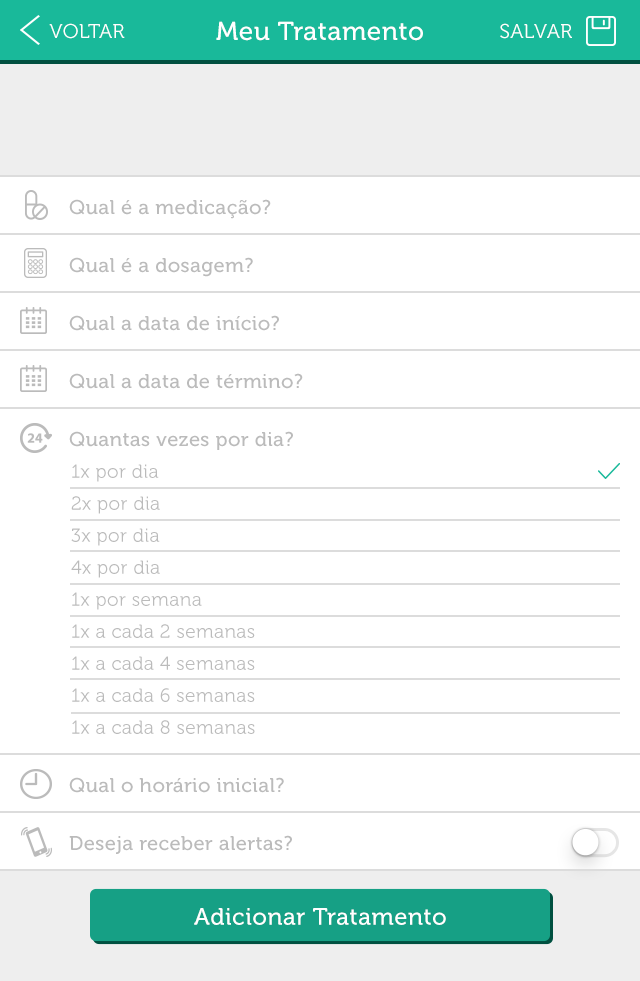
<style>
.page{position:relative;width:640px;height:981px;background:#ffffff}
.page>*{position:absolute;margin:0}
.t1{font:20px "Museo300-Regular";letter-spacing:0.02em;color:#ffffff;text-transform:uppercase}
.t2{font:26px "Museo500-Regular";letter-spacing:0.02em;color:#ffffff}
.t3{font:20px "Museo500-Regular";letter-spacing:0.02em;color:#bbbbbb}
.t4{font:19px/32px "Museo300-Regular";letter-spacing:0.02em;color:#bbbbbb}
.t5{font:23.8px "Museo500-Regular";letter-spacing:0.02em;color:#ffffff}
</style>
<div class="page">
<p class="t1" style="left:49px;top:23px;width:76px;height:16px">Voltar</p>
<p class="t2" style="left:216px;top:21px;width:207px;height:20px">Meu Tratamento</p>
<p class="t1" style="left:500px;top:23px;width:72px;height:16px">SALVAR</p>
<p class="t3" style="left:69px;top:199px;width:202px;height:20px">Qual é a medicação?</p>
<p class="t3" style="left:69px;top:257px;width:184px;height:20px">Qual é a dosagem?</p>
<p class="t3" style="left:69px;top:315px;width:210px;height:16px">Qual a data de início?</p>
<p class="t3" style="left:69px;top:373px;width:234px;height:16px">Qual a data de término?</p>
<p class="t3" style="left:69px;top:431px;width:224px;height:19px">Quantas vezes por dia?</p>
<p class="t4" style="left:71px;top:464px;width:184px;height:270px">1x por dia<br>2x por dia<br>3x por dia<br>4x por dia<br>1x por semana<br>1x a cada 2 semanas<br>1x a cada 4 semanas<br>1x a cada 6 semanas<br>1x a cada 8 semanas</p>
<p class="t3" style="left:69px;top:777px;width:215px;height:16px">Qual o horário inicial?</p>
<p class="t3" style="left:69px;top:835px;width:223px;height:19px">Deseja receber alertas?</p>
<p class="t5" style="left:194px;top:908px;width:252px;height:17px">Adicionar Tratamento</p>
</div>
